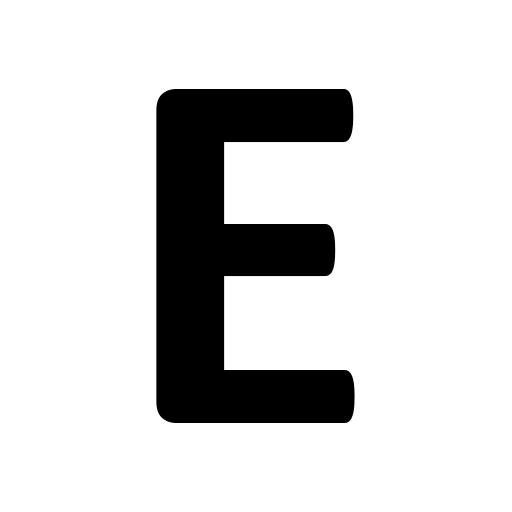
<style>
.page{position:relative;width:512px;height:512px;background:#ffffff}
.page>*{position:absolute;margin:0}
.t1{font:529.2px "Calibri-Bold";color:#000000}
</style>
<div class="page">
<p class="t1" style="left:156px;top:89px;width:199px;height:334px">E</p>
</div>
